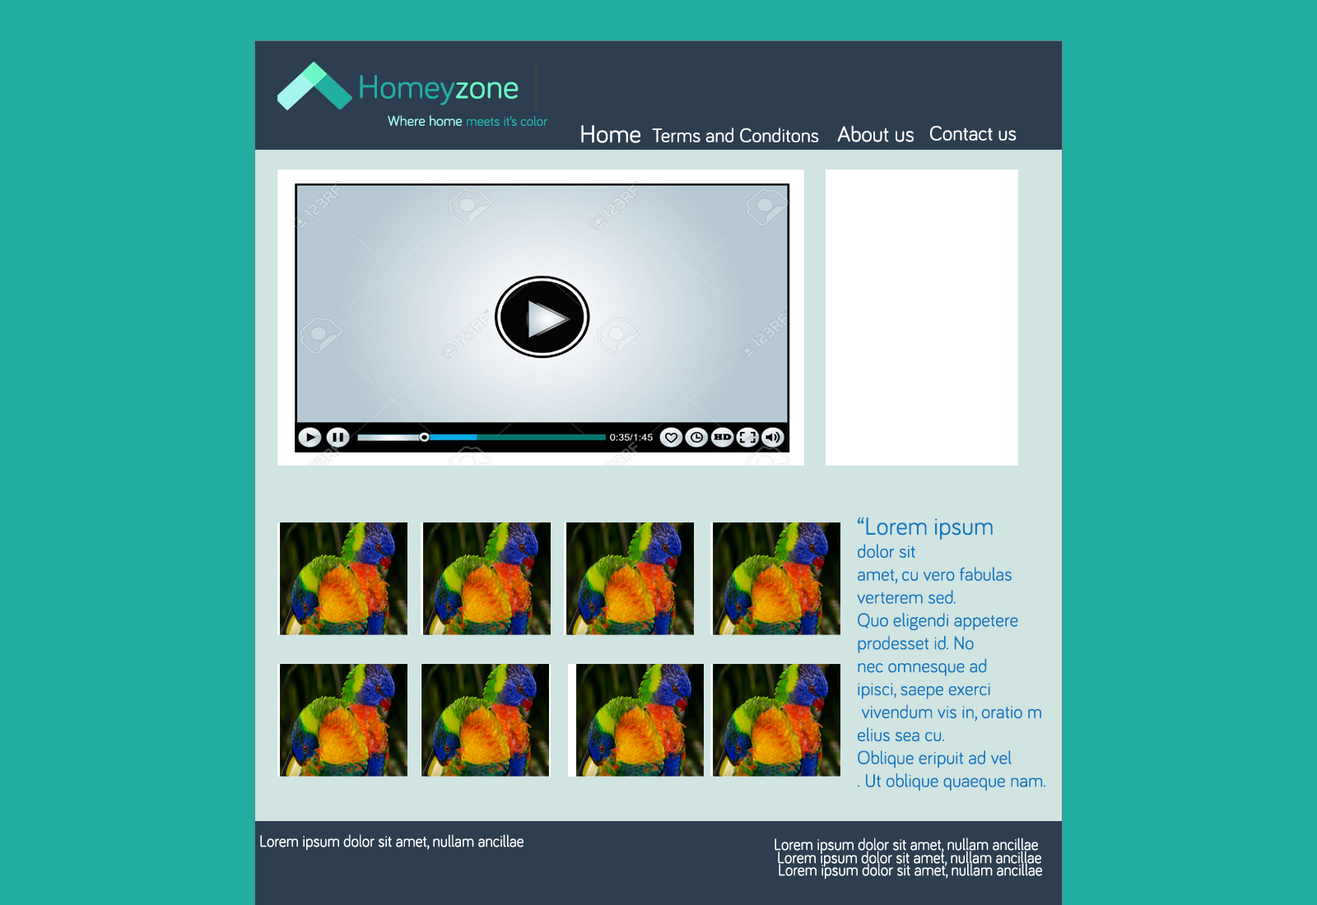
<style>
.page{position:relative;width:1317px;height:905px;background:#22aea0}
.page>*{position:absolute;margin:0}
.t1{font:34.3px "Bariol-Regular";color:#22aea0}
.t2{font:34.3px "Bariol-Regular";color:#6ef7c8}
.t3{font:13.7px "Bariol-Regular";color:#22aea0}
.t4{font:14.5px "Bariol-Regular";color:#a3f5ed}
.t5{font:25.3px "Bariol-Regular";color:#ffffff}
.t6{font:22.2px "Bariol-Regular";color:#ffffff}
.t7{font:20.7px "Bariol-Regular";color:#ffffff}
.t8{font:19.9px "Bariol-Regular";color:#ffffff}
.t9{font:19.1px "Bariol-Regular";color:#137abf}
.t10{font:25.5px "Bariol-Regular";color:#137abf}
.t11{font:16.8px "Bariol-Regular";color:#fafeff;scale:0.92 1}
</style>
<div class="page">
<p class="t1" style="left:360px;top:74px;width:159px;height:31px">Homey<span class="t2">zone</span></p>
<p class="t3" style="left:388px;top:115px;width:160px;height:11px"><span class="t4">Where home </span>meets it’s color</p>
<p class="t5" style="left:581px;top:125px;width:59px;height:18px">Home</p>
<p class="t6" style="left:837px;top:125px;width:77px;height:17px">About us</p>
<p class="t7" style="left:930px;top:126px;width:87px;height:15px">Contact us</p>
<p class="t8" style="left:652px;top:128px;width:167px;height:14px">Terms and Conditons</p>
<p class="t9" style="left:857px;top:517px;width:189px;height:275px"><span class="t10">“Lorem ipsum</span><br>dolor sit <br>amet, cu vero fabulas <br>verterem sed. <br>Quo eligendi appetere <br>prodesset id. No <br>nec omnesque ad<br>ipisci, saepe exerci<br> vivendum vis in, oratio m<br>elius sea cu. <br>Oblique eripuit ad vel<br>. Ut oblique quaeque nam.</p>
<p class="t11" style="left:260px;top:835px;width:264px;height:16px">Lorem ipsum dolor sit amet, nullam ancillae</p>
<p class="t11" style="left:775px;top:838px;width:263px;height:16px">Lorem ipsum dolor sit amet, nullam ancillae</p>
<p class="t11" style="left:778px;top:851px;width:263px;height:17px">Lorem ipsum dolor sit amet, nullam ancillae</p>
<p class="t11" style="left:779px;top:863px;width:263px;height:17px">Lorem ipsum dolor sit amet, nullam ancillae</p>
</div>
